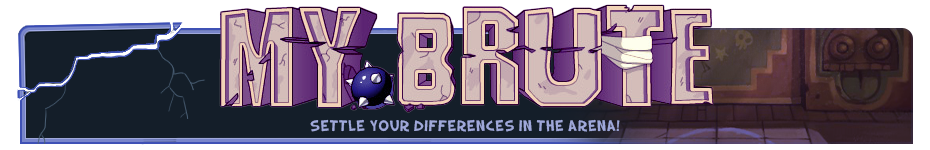
<style>
.page{position:relative;width:930px;height:150px;background:#141e29}
.page>*{position:absolute;margin:0}
.t1{font:16px "labrute";color:#9fa8da}
</style>
<div class="page">
<p class="t1" style="left:310px;top:119px;width:310px;height:13px">SETTLE YOUR DIFFERENCES IN THE ARENA!</p>
</div>
